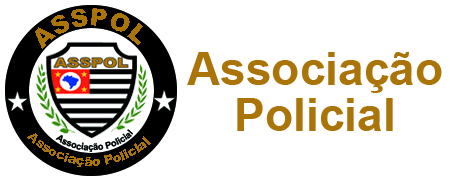
<style>
.page{position:relative;width:450px;height:180px;background:#ffffff}
.page>*{position:absolute;margin:0}
.t1{font:24.6px "Arial-Black";color:#aa7408}
.t2{font:46.1px/46.1px "Arial-BoldMT";color:#aa7409}
.t3{font:12.9px "Arial-Black";color:#aa7408}
.t4{font:9.1px "Arial-BoldMT";color:#000000}
</style>
<div class="page">
<p class="t1" style="left:35px;top:8px;width:108px;height:41px">ASSPOL</p>
<p class="t2" style="left:187px;top:52px;width:255px;height:79px;text-align:center">Associação<br>Policial</p>
<p class="t3" style="left:27px;top:133px;width:124px;height:34px;text-align:right">Associação Policial</p>
<p class="t4" style="left:55px;top:129px;width:78px;height:23px">Associação Policial</p>
</div>
